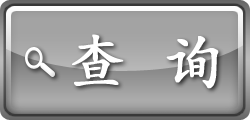
<style>
.page{position:relative;width:250px;height:120px}
.page>*{position:absolute;margin:0}
.t1{font:60px "AdobeKaitiStd-Regular";color:#ffffff;font-weight:bold}
</style>
<div class="page">
<p class="t1" style="left:72px;top:34px;width:147px;height:55px">查  询</p>
</div>
